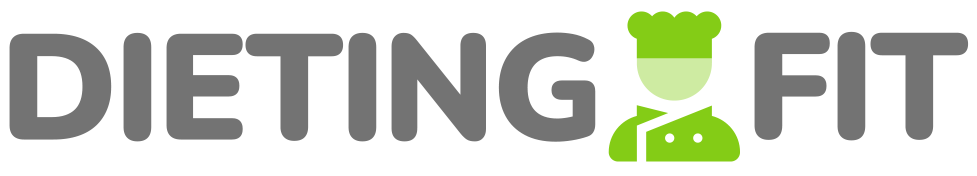
<style>
.page{position:relative;width:977px;height:176px;background:#ffffff}
.page>*{position:absolute;margin:0}
.t1{font:150px "Nunito-Black";letter-spacing:-0.025em;color:#737373}
</style>
<div class="page">
<p class="t1" style="left:9px;top:32px;width:587px;height:110px">DIETING</p>
<p class="t1" style="left:754px;top:31px;width:215px;height:110px">FIT</p>
</div>
